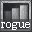
<style>
.page{position:relative;width:32px;height:32px}
.page>*{position:absolute;margin:0}
.t1{font:11px "Century";color:#ffffff}
</style>
<div class="page">
<p class="t1" style="left:1px;top:22px;width:29px;height:8px">rogue</p>
</div>
